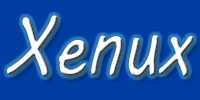
<style>
.page{position:relative;width:200px;height:100px;background:#003da1}
.page>*{position:absolute;margin:0}
.t1{font:80px "MVBoli";color:#ffffff;scale:0.82 1}
</style>
<div class="page">
<p class="t1" style="left:7px;top:15px;width:187px;height:62px">Xenux</p>
</div>
